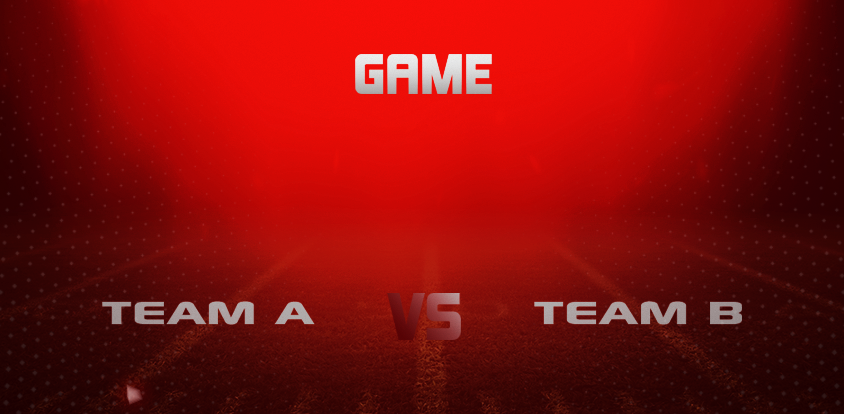
<style>
.page{position:relative;width:844px;height:414px}
.page>*{position:absolute;margin:0}
.t1{font:52.6px "KimberleyBl-Regular";text-transform:uppercase}
.t2{font:62.3px "KimberleyBl-Regular";text-transform:uppercase}
.t3{font:62.3px "Xscale";color:#b5aeaf;text-transform:uppercase}
</style>
<div class="page">
<p class="t1" style="left:355px;top:54px;width:137px;height:40px">Game</p>
<p class="t2" style="left:387px;top:293px;width:74px;height:47px">Vs</p>
<p class="t3" style="left:102px;top:301px;width:213px;height:24px">team A</p>
<p class="t3" style="left:534px;top:301px;width:208px;height:24px">team B</p>
</div>
